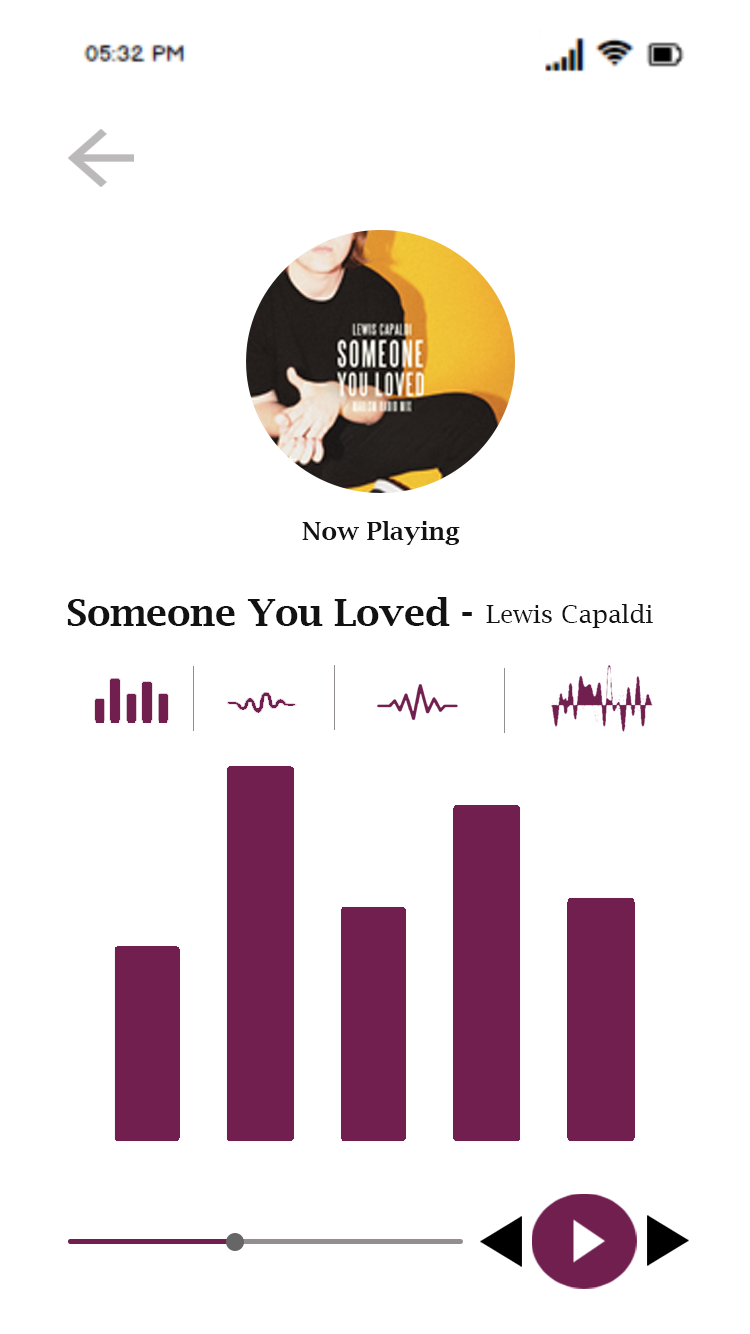
<style>
.page{position:relative;width:750px;height:1334px;background:#ffffff}
.page>*{position:absolute;margin:0}
.t1{font:25px "LucidaBright-Demi";color:#121212}
.t2{font:37.5px "LucidaBright-Demi";color:#121212}
.t3{font:25px "LucidaBright";color:#121212}
.t4{font:41.7px "LucidaBright-Demi";color:#121212}
</style>
<div class="page">
<p class="t1" style="left:302px;top:521px;width:158px;height:24px">Now Playing</p>
<p class="t2" style="left:67px;top:597px;width:383px;height:29px">Someone You Loved</p>
<p class="t3" style="left:486px;top:604px;width:167px;height:24px">Lewis Capaldi</p>
<p class="t4" style="left:462px;top:612px;width:10px;height:4px">-</p>
</div>
